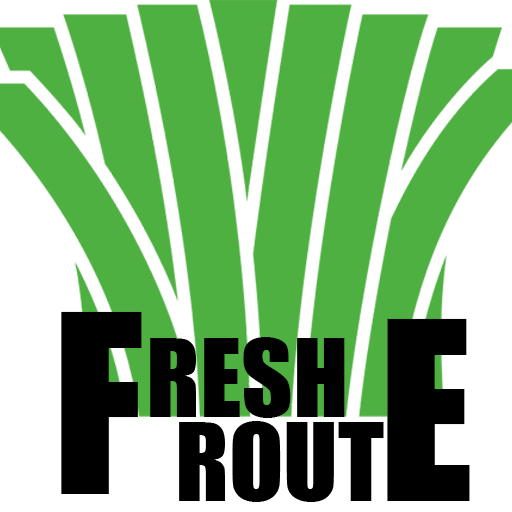
<style>
.page{position:relative;width:512px;height:512px;background:#4eb041}
.page>*{position:absolute;margin:0}
.t1{font:230px "Impact";color:#000000}
.t2{font:100px "Impact";color:#000000}
</style>
<div class="page">
<p class="t1" style="left:61px;top:311px;width:81px;height:183px">F</p>
<p class="t1" style="left:387px;top:318px;width:83px;height:183px">E</p>
<p class="t2" style="left:150px;top:337px;width:195px;height:81px">RESH</p>
<p class="t2" style="left:179px;top:421px;width:205px;height:81px">ROUT</p>
</div>
